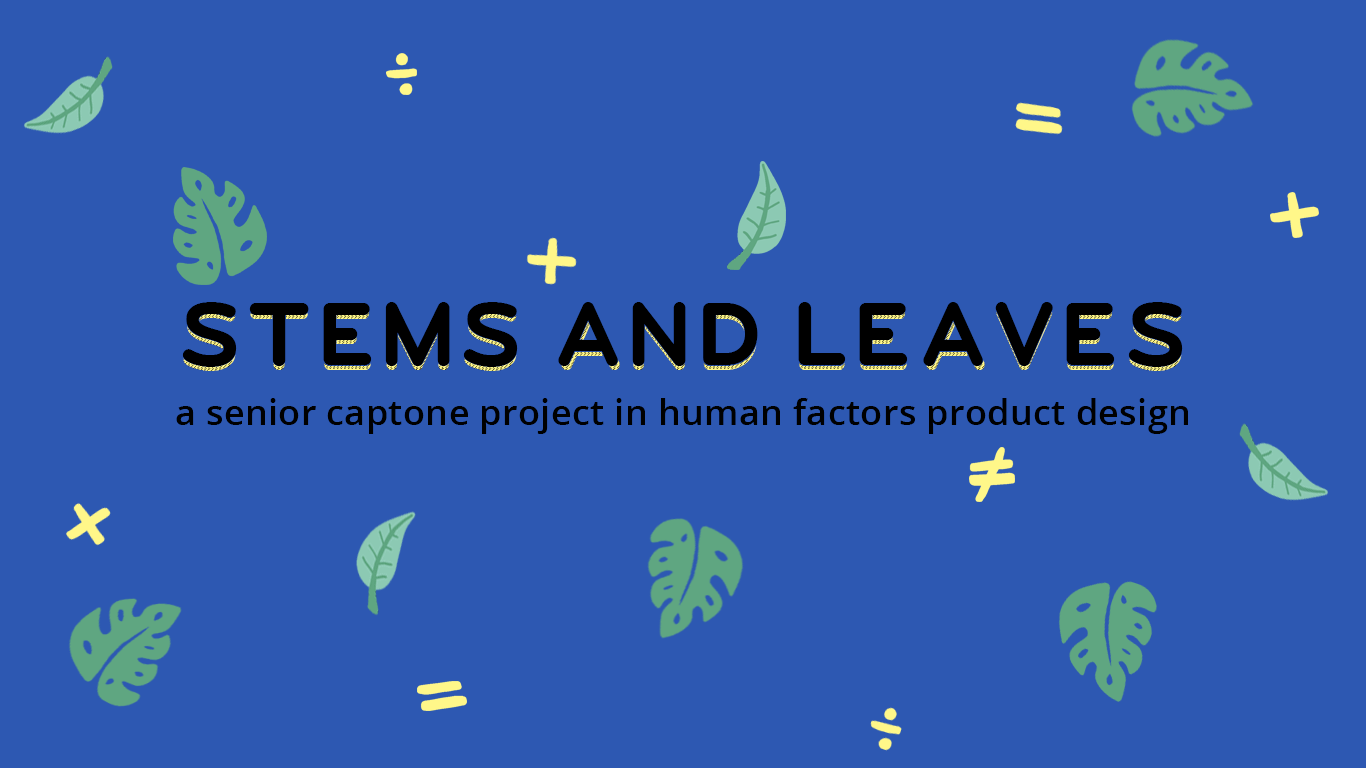
<style>
.page{position:relative;width:1366px;height:768px;background:#2d58b2}
.page>*{position:absolute;margin:0}
.t1{font:100px "UGO-COLOR";letter-spacing:0.01em;color:#000000}
.t2{font:100px "UGO-DCOLOR";letter-spacing:0.01em}
.t3{font:100px "UGO-DRAIN";letter-spacing:0.01em}
.t4{font:36px "OpenSans-SemiBold";letter-spacing:0.01em;color:#000000}
</style>
<div class="page">
<p class="t1" style="left:182px;top:302px;width:1001px;height:65px">STEMS AND LEAVES</p>
<p class="t2" style="left:183px;top:312px;width:999px;height:59px">STEMS AND LEAVES</p>
<p class="t3" style="left:183px;top:312px;width:999px;height:59px">STEMS AND LEAVES</p>
<p class="t3" style="left:183px;top:312px;width:999px;height:59px">STEMS AND LEAVES</p>
<p class="t4" style="left:176px;top:398px;width:1012px;height:36px">a senior captone project in human factors product design</p>
</div>
